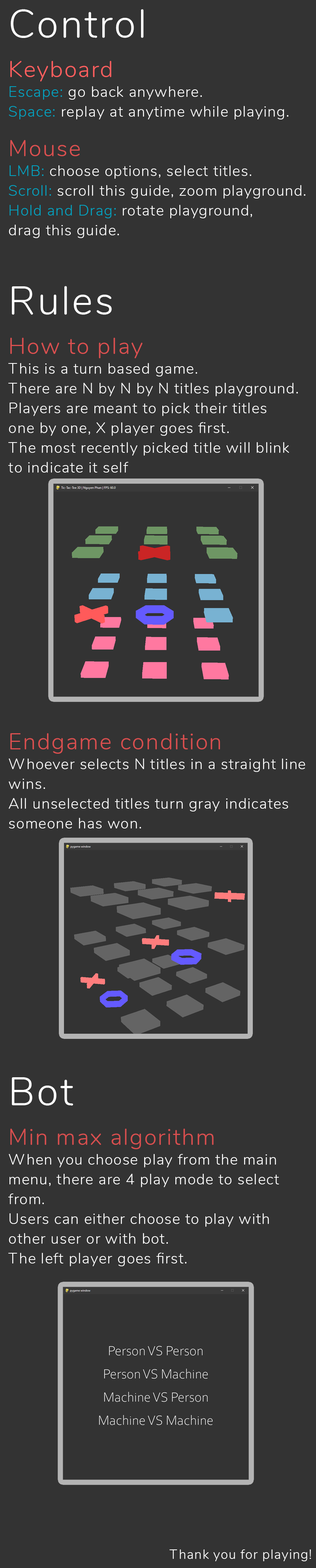
<style>
.page{position:relative;width:316px;height:1568px;background:#333333}
.page>*{position:absolute;margin:0}
.t1{font:14.8px/19.8px "Nunito-Light";letter-spacing:0.05em;color:#ffffff}
.t2{font:39.5px/19.8px "Nunito-Light";letter-spacing:0.05em;color:#ffffff}
.t3{font:23.1px/19.8px "Nunito-Light";letter-spacing:0.05em;color:#ff5f5f}
.t4{font:14.8px/19.8px "Nunito-Light";letter-spacing:0.05em;color:#00a4c2}
.t5{font:23.1px/19.8px "Nunito-Light";letter-spacing:0.05em;color:#db5050}
.t6{font:23.1px/19.8px "Nunito-Light";letter-spacing:0.05em;color:#d94f4f}
.t7{font:13.2px "Nunito-Light";letter-spacing:0.05em;color:#ffffff}
</style>
<div class="page">
<p class="t1" style="left:8px;top:9px;width:298px;height:1257px"><span class="t2">Control<br><br></span><span class="t3">Keyboard<br></span><span class="t4">Escape:</span> go back anywhere.<br><span class="t4">Space:</span> replay at anytime while playing.<br><br><span class="t5">Mouse<br></span><span class="t4">LMB:</span> choose options, select titles.<br><span class="t4">Scroll:</span> scroll this guide, zoom playground.<br><span class="t4">Hold and Drag:</span> rotate playground,<br>drag this guide.<br><br><br><br><span class="t2">Rules<br><br></span><span class="t5">How to play<br></span>This is a turn based game.<br>There are N by N by N titles playground.<br>Players are meant to pick their titles<br>one by one, X player goes first.<br>The most recently picked title will blink<br>to indicate it self<br><br><span class="t6"><br><br><br><br><br><br><br><br><br><br><br><br>Endgame condition<br></span>Whoever selects N titles in a straight line<br>wins.<br>All unselected titles turn gray indicates<br>someone has won.<br><br><br><br><br><br><br><br><br><br><br><br><br><span class="t2"><br>Bot<br></span><span class="t6"> <br>Min max algorithm<br></span>When you choose play from the main<br>menu, there are 4 play mode to select <br>from.<br>Users can either choose to play with<br>other user or with bot.<br>The left player goes first.</p>
<p class="t7" style="left:170px;top:1549px;width:142px;height:12px">Thank you for playing!</p>
</div>
